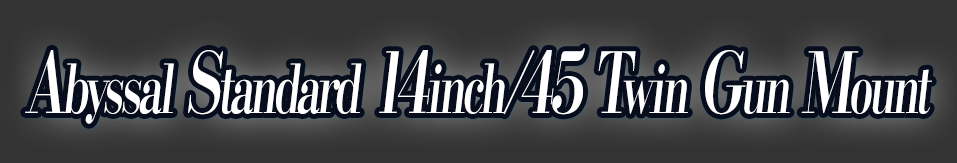
<style>
.page{position:relative;width:957px;height:163px;background:#333333}
.page>*{position:absolute;margin:0}
.t1{font:67.2px "KochoStd-Heavy";letter-spacing:-0.08em;color:#ffffff;font-style:italic;scale:0.65 1}
.t2{font:84px "KochoStd-Heavy";letter-spacing:-0.08em;color:#ffffff;font-style:italic;scale:0.65 1}
</style>
<div class="page">
<p class="t1" style="left:25px;top:48px;width:907px;height:76px"><span class="t2">A</span>byssal<span class="t2"> S</span>tandard<span class="t2"> 14</span>inch<span class="t2">/45 T</span>win<span class="t2"> G</span>un<span class="t2"> M</span>ount</p>
</div>
